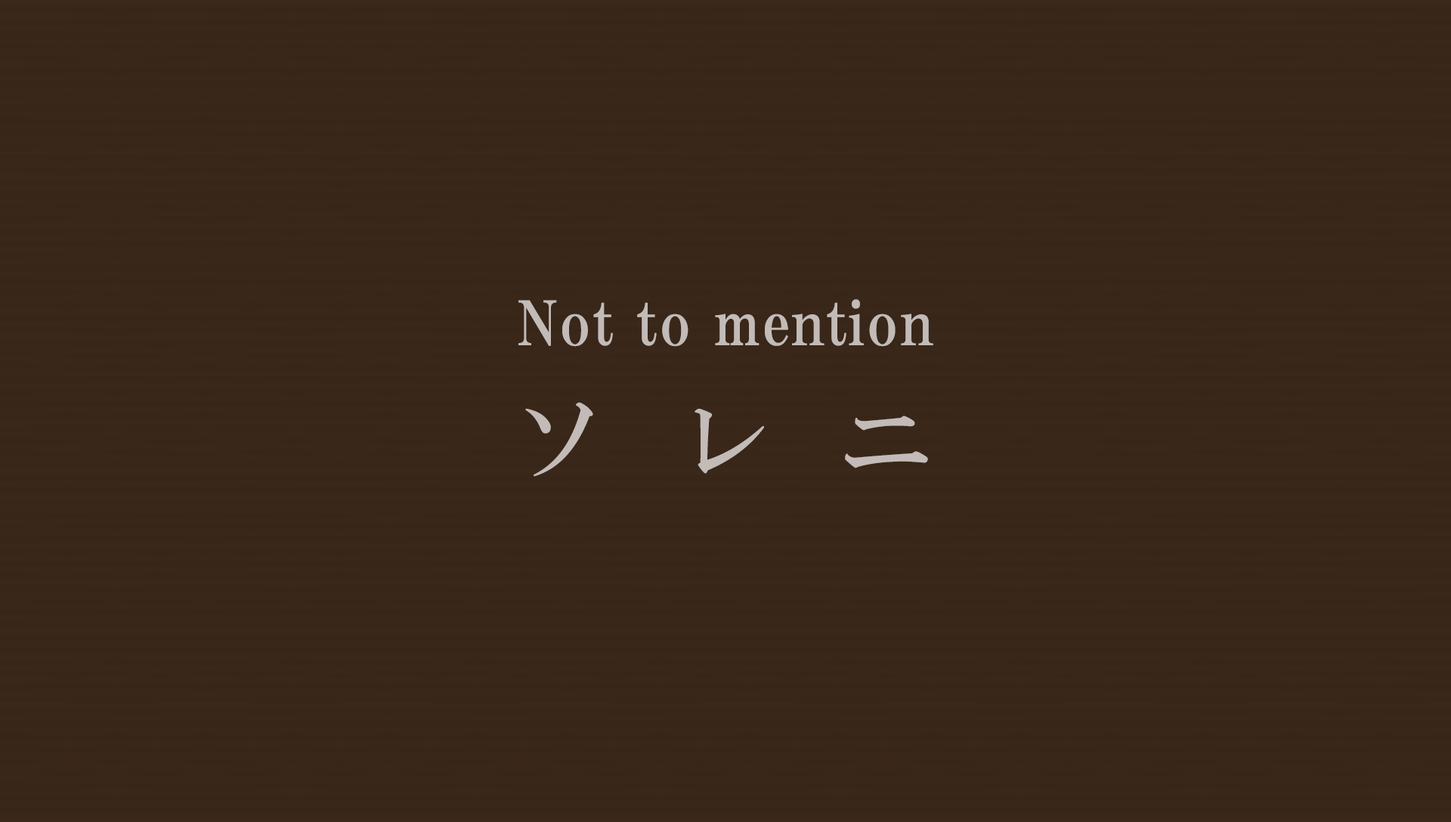
<style>
.page{position:relative;width:1451px;height:822px;background:#382719}
.page>*{position:absolute;margin:0}
.t1{font:60.4px "HGPMinchoE";letter-spacing:0.025em;color:#c2bbb7}
.t2{font:93.7px "HGMinchoB";letter-spacing:0.75em;color:#c2bbb7}
</style>
<div class="page">
<p class="t1" style="left:518px;top:299px;width:415px;height:48px">Not to mention</p>
<p class="t2" style="left:525px;top:402px;width:403px;height:75px">ソレニ</p>
</div>
